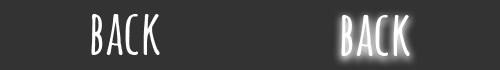
<style>
.page{position:relative;width:500px;height:70px;background:#333333}
.page>*{position:absolute;margin:0}
.t1{font:60px "AmaticSC-Bold";color:#ffffff}
</style>
<div class="page">
<p class="t1" style="left:91px;top:14px;width:69px;height:41px">back</p>
<p class="t1" style="left:341px;top:15px;width:69px;height:41px">back</p>
</div>
